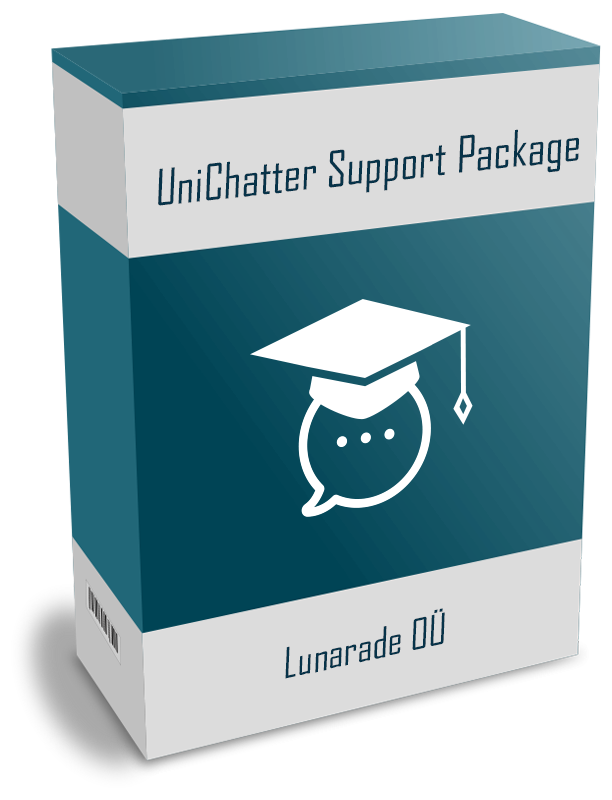
<style>
.page{position:relative;width:612px;height:800px;background:#ffffff}
.page>*{position:absolute;margin:0}
.t1{font:48.1px "AgencyFB-Reg";color:#073349}
.t2{font:40.9px "AgencyFB-Reg";color:#073349}
</style>
<div class="page">
<p class="t1" style="left:158px;top:129px;width:421px;height:77px;rotate:-6deg">UniChatter Support Package</p>
<p class="t2" style="left:285px;top:608px;width:160px;height:71px;rotate:-12deg">Lunarade OÜ</p>
</div>
